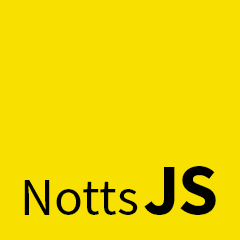
<style>
.page{position:relative;width:240px;height:240px;background:#f8e100}
.page>*{position:absolute;margin:0}
.t1{font:72px "SourceSansPro-Bold";letter-spacing:-0.01em;color:#000000}
.t2{font:53px "SourceSansPro-Regular";letter-spacing:-0.01em;color:#000000}
</style>
<div class="page">
<p class="t1" style="left:144px;top:166px;width:72px;height:49px">JS</p>
<p class="t2" style="left:24px;top:180px;width:114px;height:35px">Notts</p>
</div>
